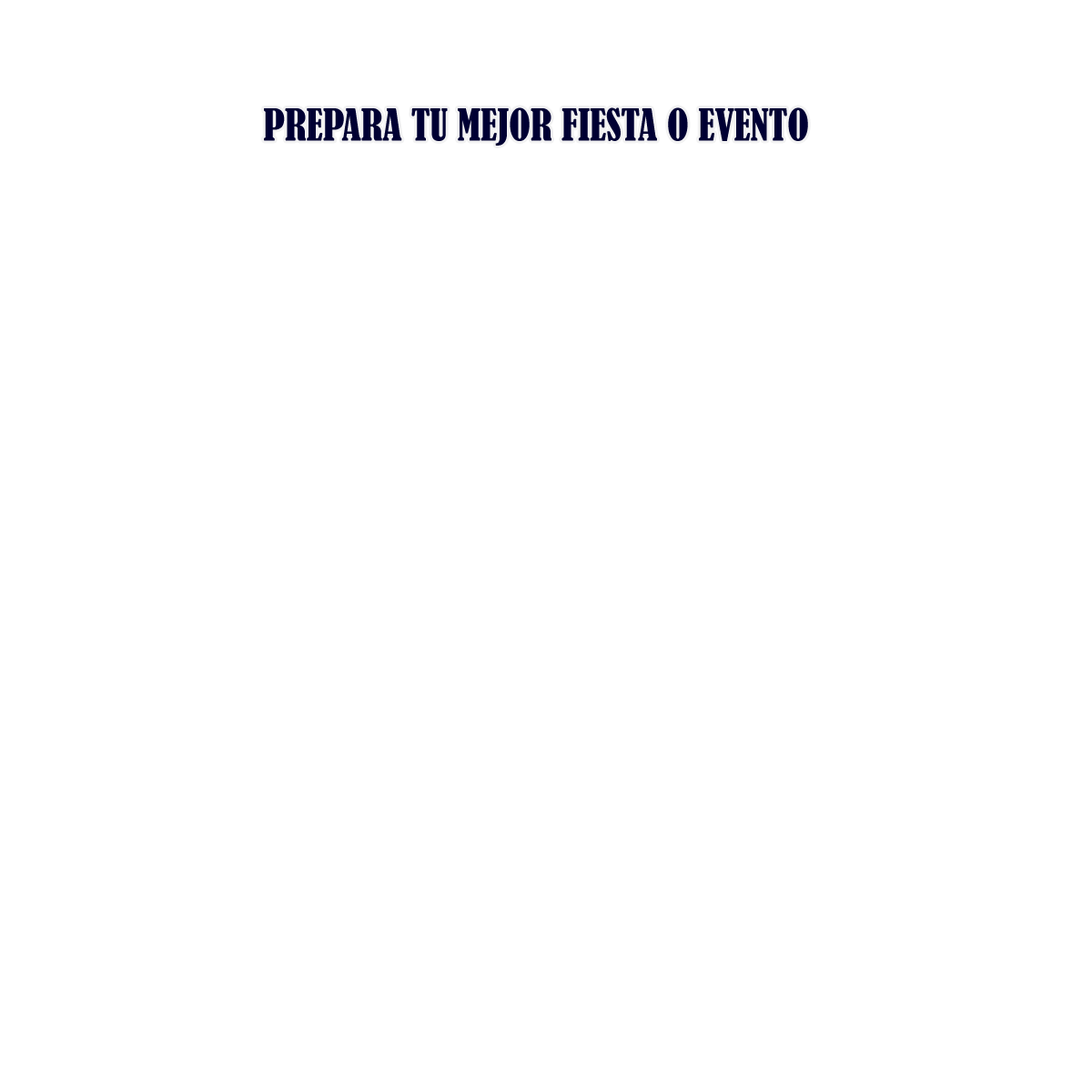
<style>
.page{position:relative;width:1092px;height:1092px;background:#ffffff}
.page>*{position:absolute;margin:0}
.t1{font:41.1px "BernardMT-Condensed";color:#000033;scale:0.97 1}
</style>
<div class="page">
<p class="t1" style="left:264px;top:107px;width:544px;height:39px">PREPARA TU MEJOR FIESTA O EVENTO</p>
</div>
